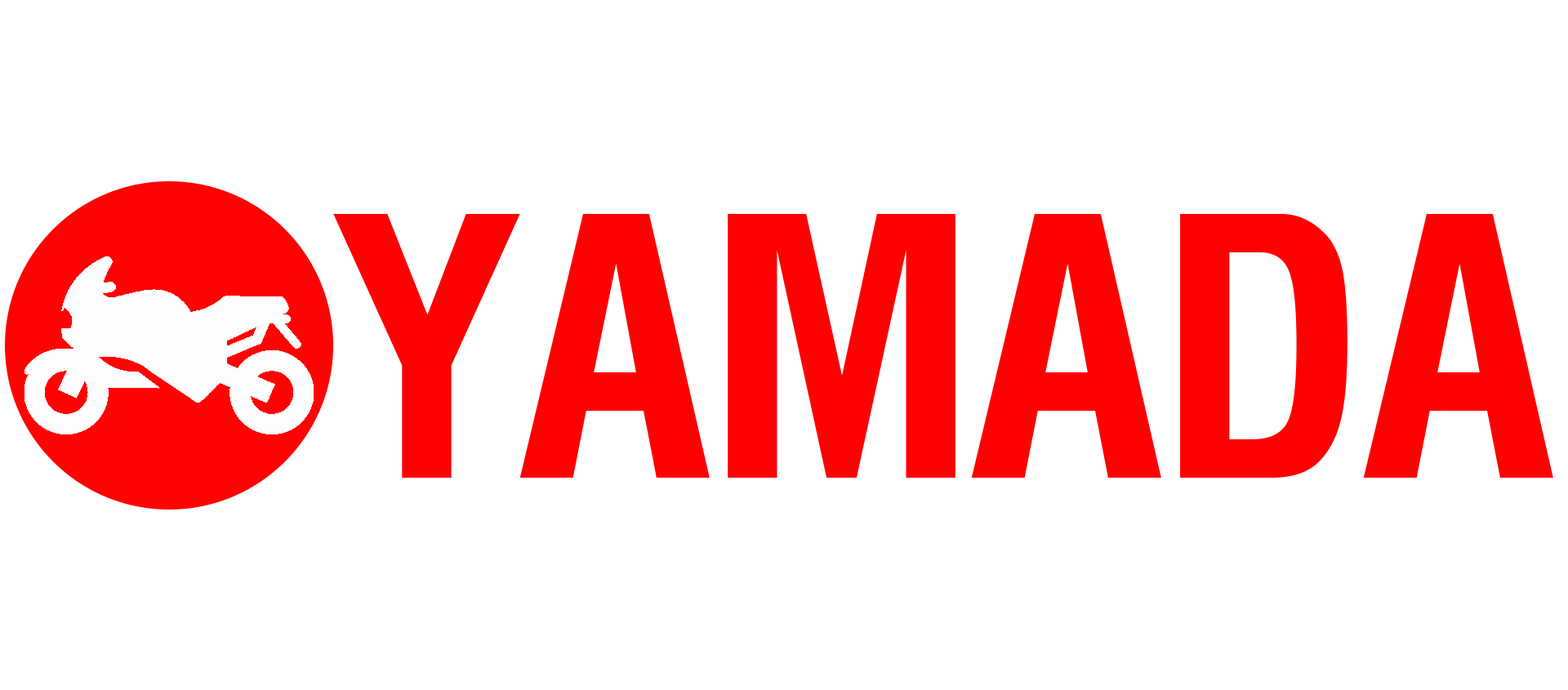
<style>
.page{position:relative;width:1568px;height:690px;background:#ffffff}
.page>*{position:absolute;margin:0}
.t1{font:351.2px "Helvetica-Condensed-Bold";letter-spacing:-0.025em;color:#ff0000}
</style>
<div class="page">
<p class="t1" style="left:333px;top:214px;width:1220px;height:264px">YAMADA</p>
</div>
